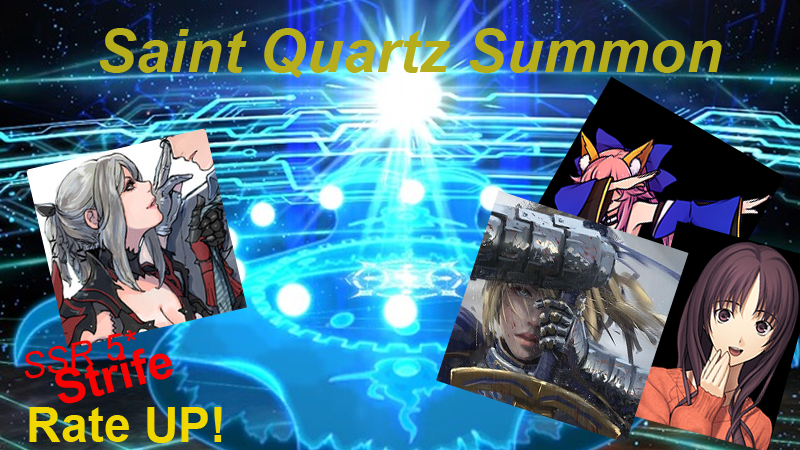
<style>
.page{position:relative;width:800px;height:450px}
.page>*{position:absolute;margin:0}
.t1{font:60px "Arial-BoldItalicMT";color:#b7ae1d}
.t2{font:36px "Arial-ItalicMT";color:#f80303}
.t3{font:48px "Arial-BoldMT";color:#f80303}
.t4{font:48px "Arial-BoldMT";color:#f1d700}
</style>
<div class="page">
<p class="t1" style="left:99px;top:28px;width:623px;height:50px">Saint Quartz Summon</p>
<p class="t2" style="left:24px;top:330px;width:112px;height:49px;rotate:-12deg">SSR 5*</p>
<p class="t3" style="left:55px;top:348px;width:118px;height:56px;rotate:-15deg">Strife</p>
<p class="t4" style="left:29px;top:407px;width:193px;height:36px">Rate UP!</p>
</div>
